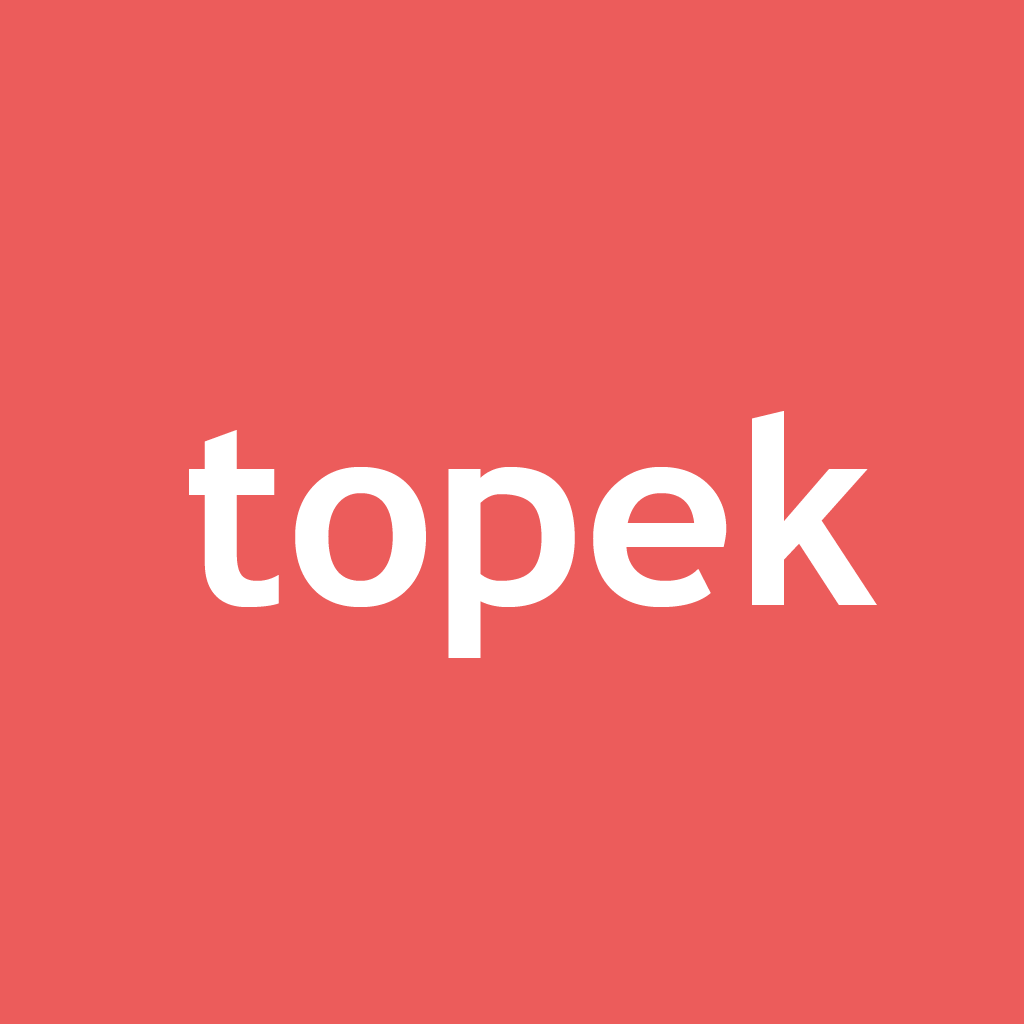
<style>
.page{position:relative;width:1024px;height:1024px;background:#ec5c5b}
.page>*{position:absolute;margin:0}
.t1{font:260px "TrebuchetMS-Bold";color:#ffffff}
</style>
<div class="page">
<p class="t1" style="left:189px;top:411px;width:688px;height:247px">topek</p>
</div>
